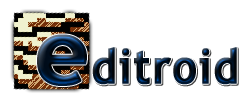
<style>
.page{position:relative;width:250px;height:103px;background:#ffffff}
.page>*{position:absolute;margin:0}
.t1{font:92.9px "TrebuchetMS-Bold";letter-spacing:0.025em;font-weight:bold}
.t2{font:47.8px "TrebuchetMS-Bold";letter-spacing:0.025em;font-weight:bold;scale:0.89 1}
</style>
<div class="page">
<p class="t1" style="left:37px;top:34px;width:50px;height:52px">e</p>
<p class="t2" style="left:92px;top:47px;width:145px;height:38px">ditroid</p>
</div>
